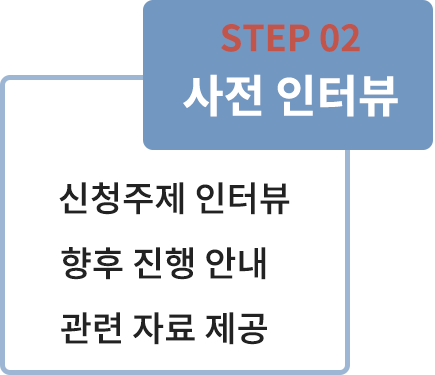
<style>
.page{position:relative;width:435px;height:375px;background:#ffffff}
.page>*{position:absolute;margin:0}
.t1{font:36px "NotoSansCJKkr-Bold";color:#c1554b}
.t2{font:45px "NotoSansCJKkr-Bold";color:#ffffff}
.t3{font:35px "NotoSansCJKkr-Medium";color:#222222}
</style>
<div class="page">
<p class="t1" style="left:221px;top:24px;width:139px;height:28px">STEP 02</p>
<p class="t2" style="left:183px;top:74px;width:215px;height:43px">사전 인터뷰</p>
<p class="t3" style="left:59px;top:182px;width:231px;height:33px">신청주제 인터뷰</p>
<p class="t3" style="left:61px;top:247px;width:205px;height:33px">향후 진행 안내</p>
<p class="t3" style="left:61px;top:312px;width:206px;height:33px">관련 자료 제공</p>
</div>
